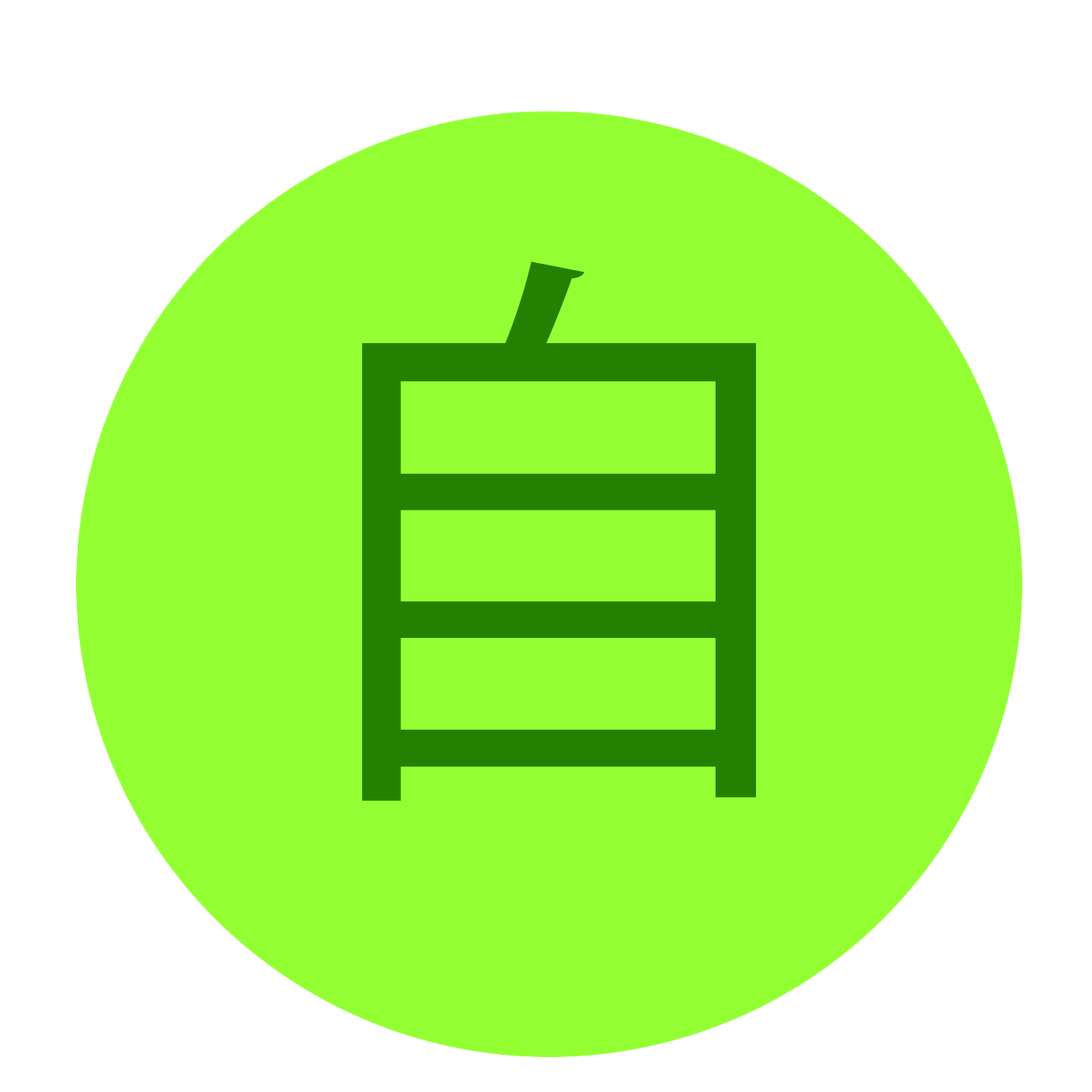
<style>
.page{position:relative;width:1092px;height:1092px;background:#93ff33}
.page>*{position:absolute;margin:0}
.t1{font:577.8px "KozGoPr6N-Regular";color:#248000}
</style>
<div class="page">
<p class="t1" style="left:361px;top:262px;width:395px;height:539px">自</p>
</div>
